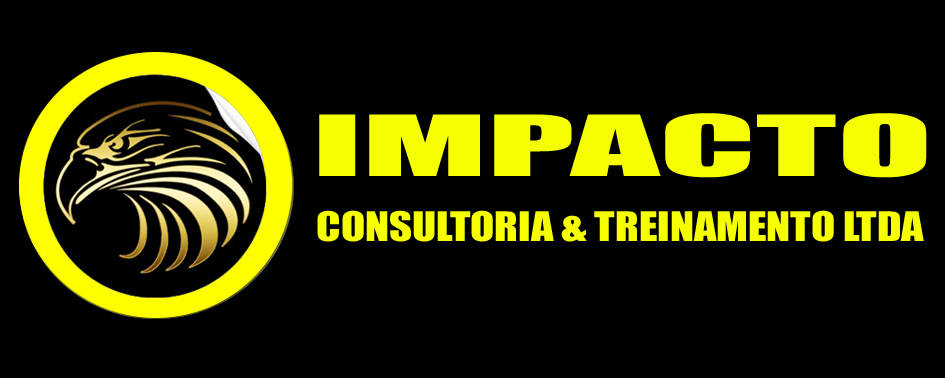
<style>
.page{position:relative;width:945px;height:378px;background:#000000}
.page>*{position:absolute;margin:0}
.t1{font:77.8px "Impact";color:#f6ff00;scale:2.25 1}
.t2{font:37.4px "Impact";color:#f6ff00;scale:1.18 1}
</style>
<div class="page">
<p class="t1" style="left:319px;top:113px;width:608px;height:65px">IMPACTO</p>
<p class="t2" style="left:317px;top:210px;width:607px;height:32px">CONSULTORIA &amp; TREINAMENTO LTDA</p>
</div>
